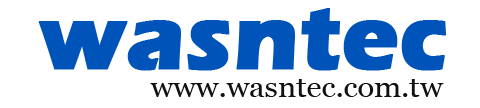
<style>
.page{position:relative;width:480px;height:108px;background:#ffffff}
.page>*{position:absolute;margin:0}
.t1{font:93.8px "ErasITC-Bold";color:#0053b8;font-weight:bold}
.t2{font:27.8px "Georgia";color:#111111;scale:1.1 1}
</style>
<div class="page">
<p class="t1" style="left:38px;top:8px;width:408px;height:63px">wasntec</p>
<p class="t2" style="left:150px;top:79px;width:294px;height:18px">www.wasntec.com.tw</p>
</div>
